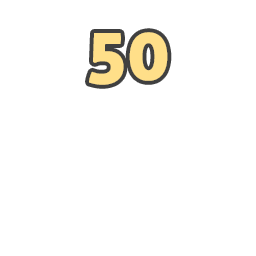
<style>
.page{position:relative;width:256px;height:256px;background:#ffffff}
.page>*{position:absolute;margin:0}
.t1{font:72px "AllerDisplay";color:#ffdf89}
</style>
<div class="page">
<p class="t1" style="left:89px;top:32px;width:79px;height:53px">50</p>
<p class="t1" style="left:89px;top:32px;width:79px;height:53px;opacity:0.75">50</p>
</div>
